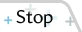
<style>
.page{position:relative;width:82px;height:32px;background:#ffffff}
.page>*{position:absolute;margin:0}
.t1{font:18.7px "Amira-Roman";color:#000000}
</style>
<div class="page">
<p class="t1" style="left:16px;top:10px;width:37px;height:18px;opacity:0.96">Stop</p>
</div>
